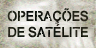
<style>
.page{position:relative;width:96px;height:48px}
.page>*{position:absolute;margin:0}
.t1{font:14px/16px "Arial-BoldMT";letter-spacing:-0.02em;color:#181b12;scale:0.94 1}
</style>
<div class="page">
<p class="t1" style="left:7px;top:8px;width:81px;height:30px;text-align:center">OPERAÇÕES<br>DE SATÉLITE</p>
</div>
